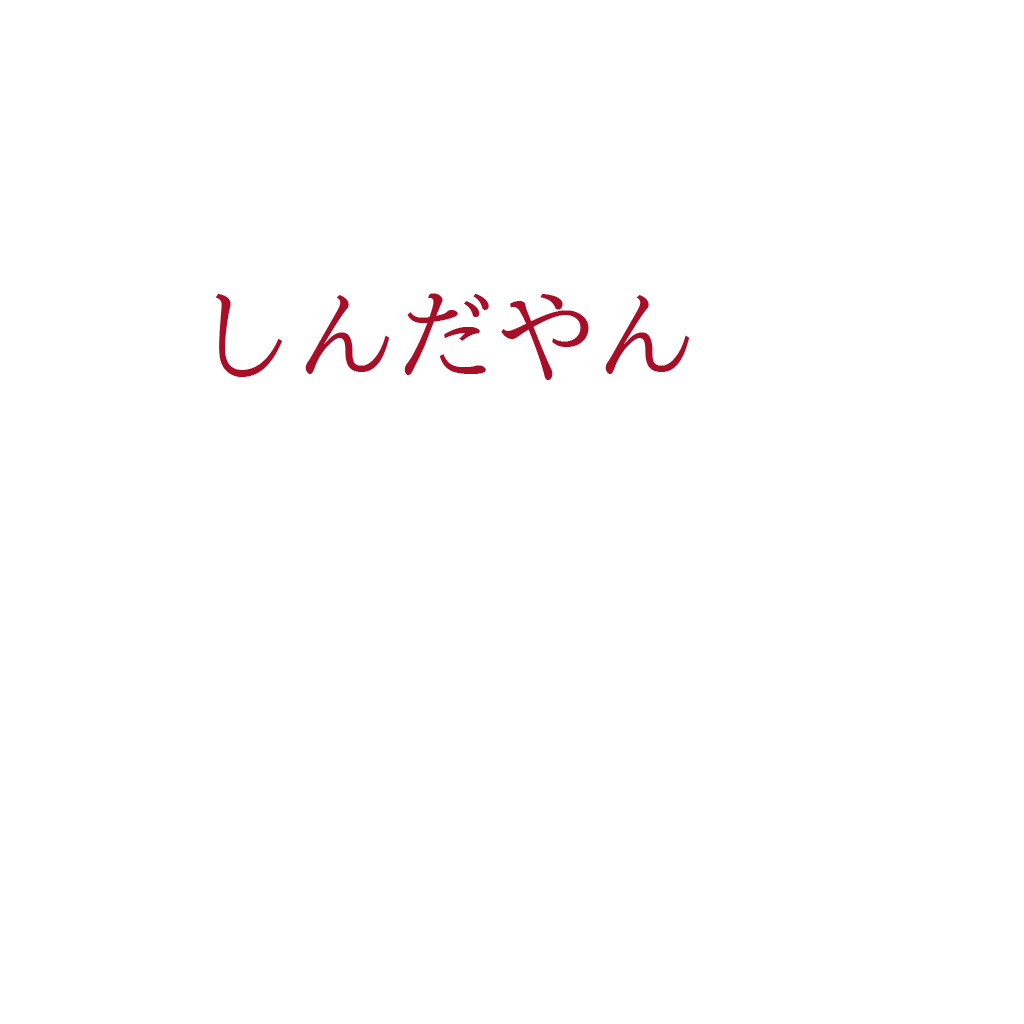
<style>
.page{position:relative;width:1024px;height:1024px;background:#ffffff}
.page>*{position:absolute;margin:0}
.t1{font:100px "BIZ-UDMincho-Medium";color:#a70e28}
</style>
<div class="page">
<p class="t1" style="left:215px;top:293px;width:474px;height:87px">しんだやん</p>
</div>
